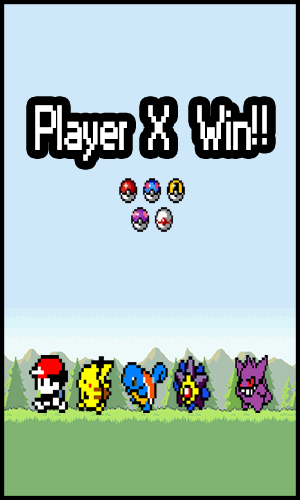
<style>
.page{position:relative;width:300px;height:500px;background:#cee7f9}
.page>*{position:absolute;margin:0}
.t1{font:58.3px "Small Fonts";color:#ffffff;font-weight:bold;scale:0.71 1}
</style>
<div class="page">
<p class="t1" style="left:35px;top:105px;width:232px;height:56px">Player   X    Win!!</p>
</div>
